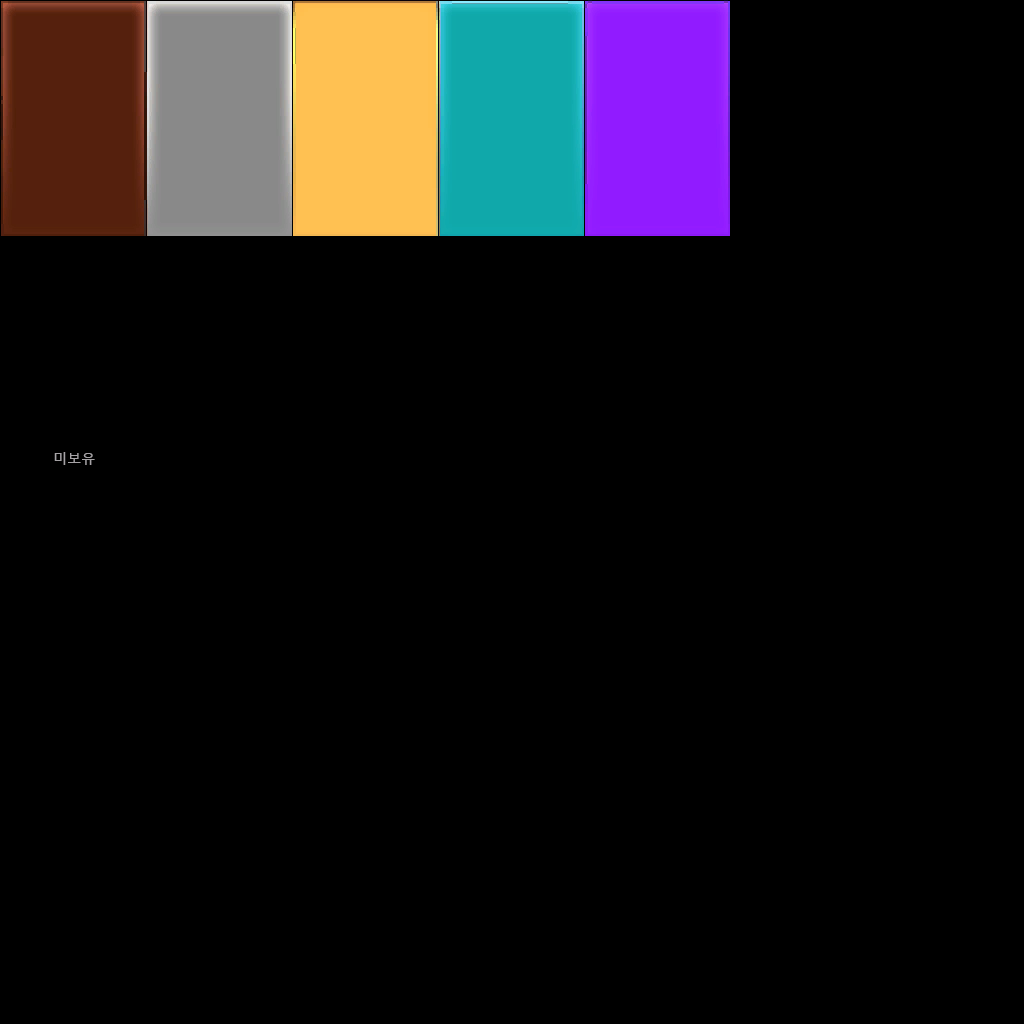
<style>
.page{position:relative;width:1024px;height:1024px;background:#000000}
.page>*{position:absolute;margin:0}
.t1{font:14px "MalgunGothicRegular";color:#a5a2a5}
</style>
<div class="page">
<p class="t1" style="left:54px;top:452px;width:41px;height:13px">미보유</p>
</div>
